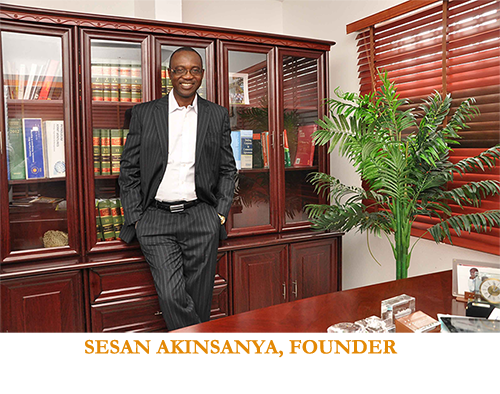
<style>
.page{position:relative;width:500px;height:394px}
.page>*{position:absolute;margin:0}
.t1{font:20.8px "Garamond-Bold";color:#e38805;text-transform:uppercase}
</style>
<div class="page">
<p class="t1" style="left:85px;top:339px;width:313px;height:19px">Sesan Akinsanya, Founder</p>
</div>
